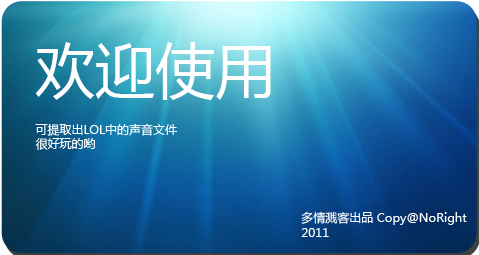
<style>
.page{position:relative;width:479px;height:255px}
.page>*{position:absolute;margin:0}
.t1{font:60px "MicrosoftYaHei";color:#ffffff}
.t2{font:12px "MicrosoftYaHei";color:#ffffff}
</style>
<div class="page">
<p class="t1" style="left:35px;top:42px;width:236px;height:58px">欢迎使用</p>
<p class="t2" style="left:35px;top:123px;width:142px;height:27px">可提取出LOL中的声音文件<br>很好玩的哟</p>
<p class="t2" style="left:301px;top:211px;width:166px;height:26px">多情溅客出品 Copy@NoRight 2011</p>
</div>
